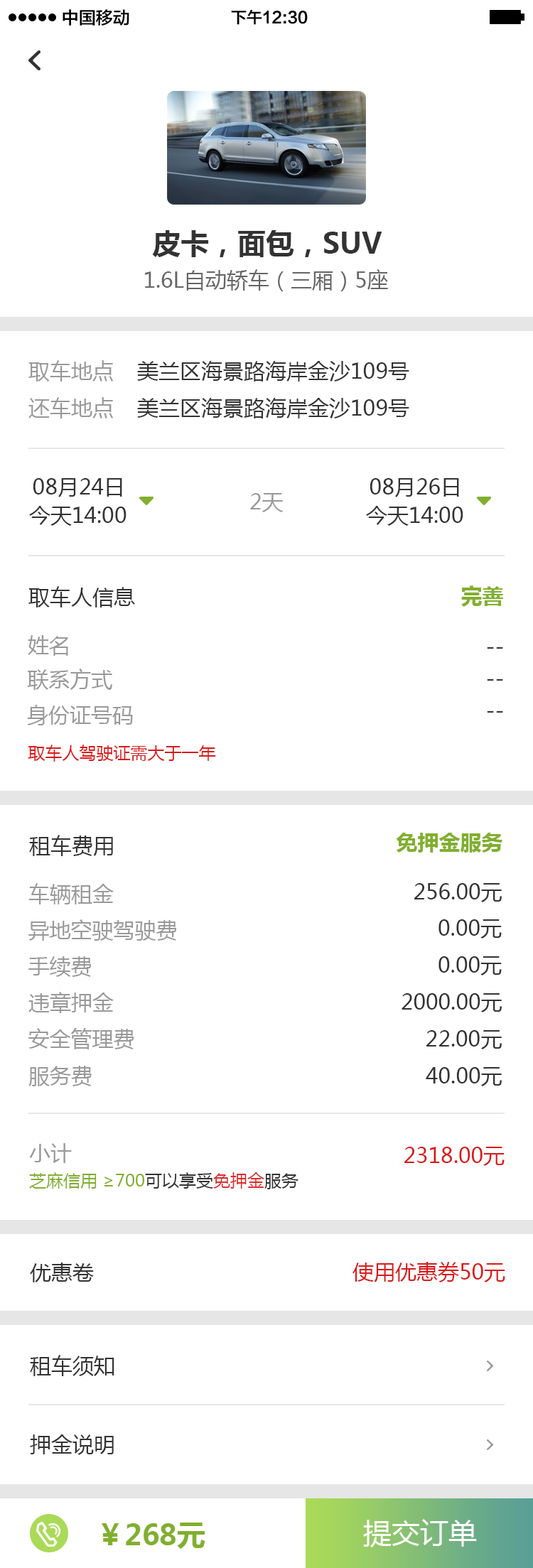
<style>
.page{position:relative;width:533px;height:1568px;background:#ffffff}
.page>*{position:absolute;margin:0}
.t1{font:17.1px "FZLTZHK--GBK1-0";color:#000000}
.t2{font:15.6px "FZLTZHK--GBK1-0";color:#000000}
.t3{font:28.4px "MicrosoftYaHei-Bold";color:#333333}
.t4{font:21.3px "MicrosoftYaHei";color:#666666}
.t5{font:21.3px "MicrosoftYaHei";color:#999999}
.t6{font:21.3px "MicrosoftYaHei";color:#333333}
.t7{font:21.3px "MicrosoftYaHei-Bold";color:#81af2f}
.t8{font:17.1px "MicrosoftYaHei";color:#d91a1a}
.t9{font:21.3px "MicrosoftYaHei";color:#d91a1a}
.t10{font:17.1px "MicrosoftYaHei";color:#81af2f}
.t11{font:17.1px "MicrosoftYaHei";color:#333333}
.t12{font:17.1px "MicrosoftYaHei";color:#db2f2f}
.t13{font:28.4px "MicrosoftYaHei-Bold";color:#81af2f}
.t14{font:28.4px "MicrosoftYaHei";color:#ffffff}
</style>
<div class="page">
<p class="t1" style="left:63px;top:9px;width:66px;height:17px">中国移动</p>
<p class="t2" style="left:231px;top:10px;width:77px;height:15px">下午12:30</p>
<p class="t3" style="left:152px;top:230px;width:230px;height:27px">皮卡，面包，SUV</p>
<p class="t4" style="left:145px;top:269px;width:243px;height:22px">1.6L自动轿车（三厢）5座</p>
<p class="t5" style="left:28px;top:360px;width:85px;height:22px">取车地点</p>
<p class="t6" style="left:137px;top:361px;width:272px;height:21px">美兰区海景路海岸金沙109号</p>
<p class="t5" style="left:28px;top:397px;width:85px;height:21px">还车地点</p>
<p class="t6" style="left:137px;top:398px;width:272px;height:20px">美兰区海景路海岸金沙109号</p>
<p class="t6" style="left:33px;top:478px;width:89px;height:19px">08月24日</p>
<p class="t6" style="left:369px;top:478px;width:90px;height:19px">08月26日</p>
<p class="t5" style="left:250px;top:493px;width:33px;height:19px">2天</p>
<p class="t6" style="left:29px;top:506px;width:97px;height:20px">今天14:00</p>
<p class="t6" style="left:366px;top:506px;width:97px;height:20px">今天14:00</p>
<p class="t6" style="left:28px;top:586px;width:107px;height:21px">取车人信息</p>
<p class="t7" style="left:461px;top:585px;width:42px;height:22px">完善</p>
<p class="t5" style="left:28px;top:635px;width:40px;height:21px">姓名</p>
<p class="t6" style="left:487px;top:647px;width:16px;height:2px">--</p>
<p class="t5" style="left:27px;top:669px;width:85px;height:21px">联系方式</p>
<p class="t6" style="left:487px;top:679px;width:16px;height:2px">--</p>
<p class="t5" style="left:27px;top:705px;width:106px;height:20px">身份证号码</p>
<p class="t6" style="left:487px;top:711px;width:16px;height:2px">--</p>
<p class="t8" style="left:28px;top:745px;width:188px;height:17px">取车人驾驶证需大于一年</p>
<p class="t7" style="left:396px;top:833px;width:106px;height:20px">免押金服务</p>
<p class="t6" style="left:29px;top:835px;width:84px;height:21px">租车费用</p>
<p class="t5" style="left:28px;top:883px;width:86px;height:21px">车辆租金</p>
<p class="t6" style="left:414px;top:883px;width:88px;height:19px">256.00元</p>
<p class="t5" style="left:28px;top:919px;width:148px;height:22px">异地空驶驾驶费</p>
<p class="t6" style="left:438px;top:919px;width:64px;height:20px">0.00元</p>
<p class="t5" style="left:28px;top:956px;width:63px;height:21px">手续费</p>
<p class="t6" style="left:438px;top:956px;width:64px;height:19px">0.00元</p>
<p class="t5" style="left:28px;top:992px;width:86px;height:21px">违章押金</p>
<p class="t6" style="left:401px;top:993px;width:101px;height:19px">2000.00元</p>
<p class="t5" style="left:28px;top:1028px;width:106px;height:21px">安全管理费</p>
<p class="t6" style="left:426px;top:1030px;width:76px;height:19px">22.00元</p>
<p class="t5" style="left:28px;top:1066px;width:64px;height:20px">服务费</p>
<p class="t6" style="left:426px;top:1067px;width:76px;height:19px">40.00元</p>
<p class="t5" style="left:29px;top:1143px;width:43px;height:20px">小计</p>
<p class="t9" style="left:404px;top:1147px;width:100px;height:19px">2318.00元</p>
<p class="t10" style="left:29px;top:1172px;width:269px;height:17px">芝麻信用 ≥700<span class="t11">可以享受</span><span class="t12">免押金</span><span class="t11">服务</span></p>
<p class="t6" style="left:30px;top:1262px;width:64px;height:20px">优惠卷</p>
<p class="t9" style="left:352px;top:1262px;width:153px;height:20px">使用优惠券50元</p>
<p class="t6" style="left:30px;top:1355px;width:84px;height:21px">租车须知</p>
<p class="t6" style="left:30px;top:1434px;width:84px;height:21px">押金说明</p>
<p class="t13" style="left:102px;top:1523px;width:103px;height:26px">￥268元</p>
<p class="t14" style="left:363px;top:1519px;width:114px;height:28px">提交订单</p>
</div>
